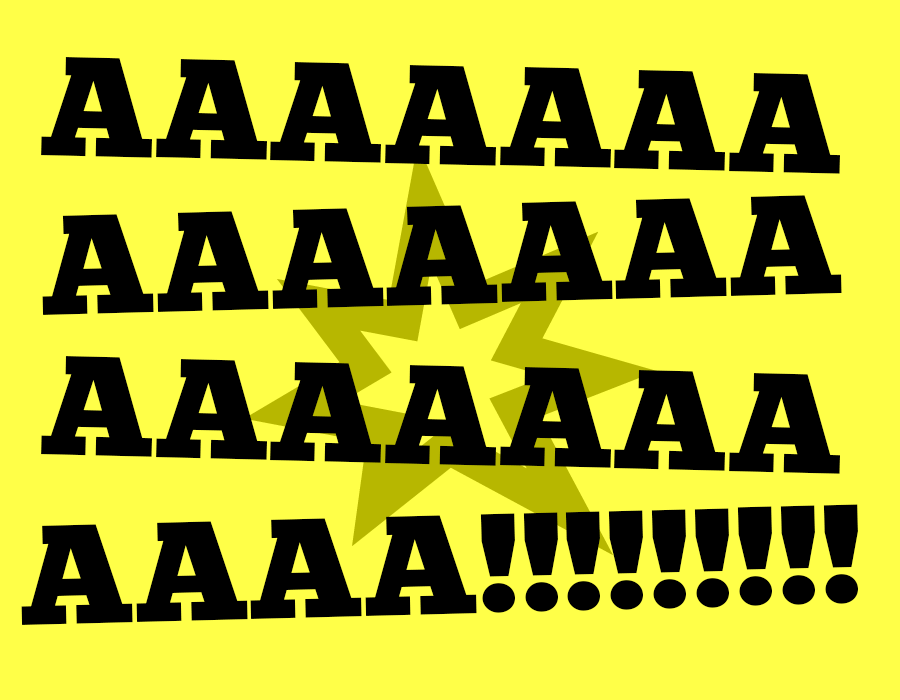
<style>
.page{position:relative;width:900px;height:700px;background:#ffff48}
.page>*{position:absolute;margin:0}
.t1{font:141px "ChunkFive-Roman";color:#000000}
</style>
<div class="page">
<p class="t1" style="left:41px;top:57px;width:799px;height:117px;rotate:1deg">AAAAAAA</p>
<p class="t1" style="left:42px;top:195px;width:800px;height:120px;rotate:-2deg">AAAAAAA</p>
<p class="t1" style="left:41px;top:356px;width:799px;height:118px;rotate:1deg">AAAAAAA</p>
<p class="t1" style="left:21px;top:504px;width:837px;height:121px;rotate:-1deg">AAAA!!!!!!!!!</p>
</div>
